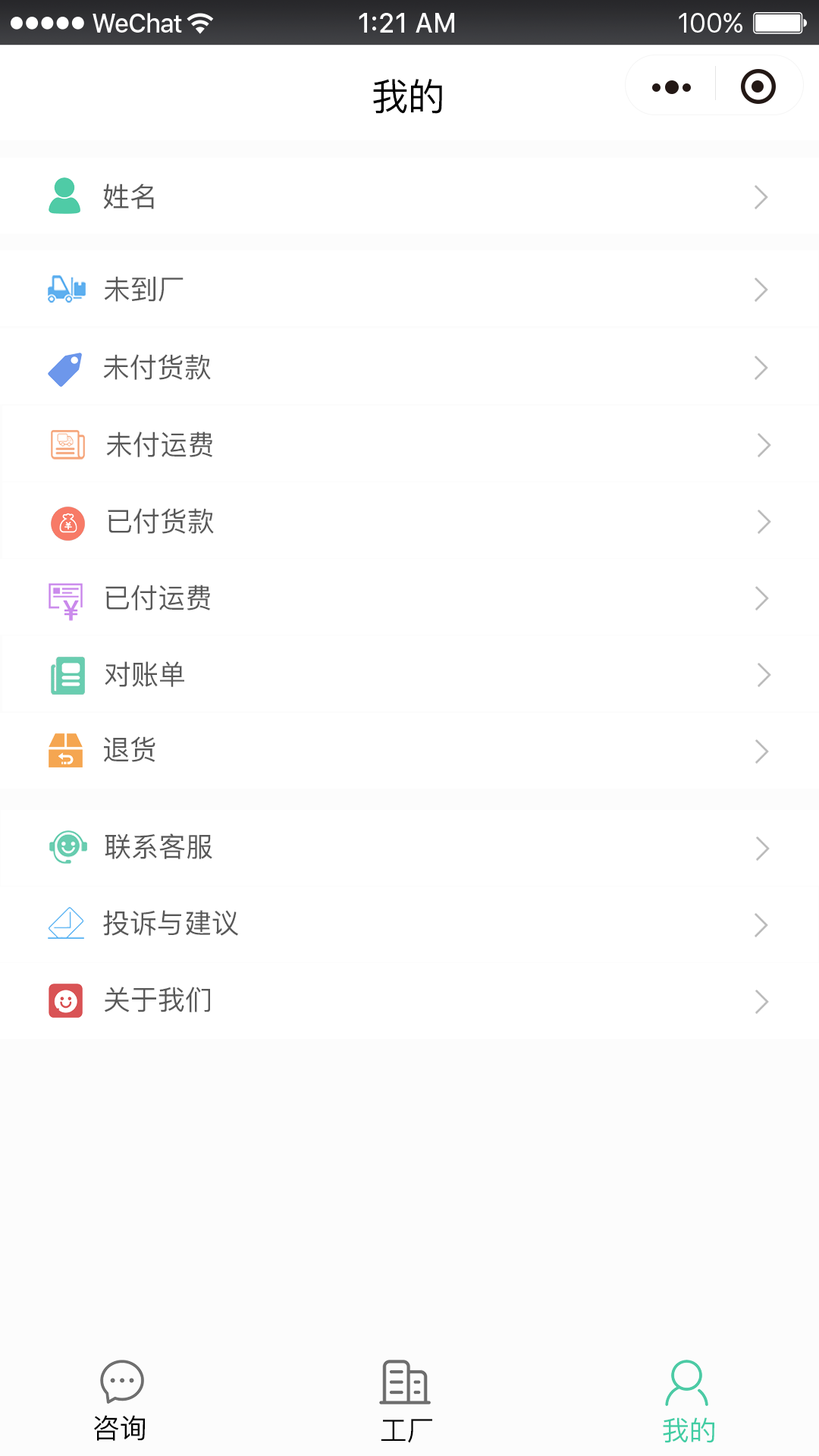
<style>
.page{position:relative;width:819px;height:1456px;background:#ffffff}
.page>*{position:absolute;margin:0}
.t1{font:37.9px "PingFangSC-Regular";color:#000000}
.t2{font:27.3px "PingFangSC-Regular";color:#585858}
.t3{font:27.3px "PingFangSC-Regular";color:#000000}
.t4{font:27.3px "PingFangSC-Regular";color:#40cda4}
</style>
<div class="page">
<p class="t1" style="left:373px;top:79px;width:69px;height:35px">我的</p>
<p class="t2" style="left:103px;top:184px;width:51px;height:25px">姓名</p>
<p class="t2" style="left:104px;top:276px;width:80px;height:26px">未到厂</p>
<p class="t2" style="left:103px;top:354px;width:108px;height:26px">未付货款</p>
<p class="t2" style="left:106px;top:431px;width:107px;height:26px">未付运费</p>
<p class="t2" style="left:108px;top:508px;width:106px;height:26px">已付货款</p>
<p class="t2" style="left:105px;top:585px;width:106px;height:25px">已付运费</p>
<p class="t2" style="left:105px;top:661px;width:79px;height:26px">对账单</p>
<p class="t2" style="left:104px;top:736px;width:51px;height:26px">退货</p>
<p class="t2" style="left:105px;top:833px;width:107px;height:26px">联系客服</p>
<p class="t2" style="left:103px;top:910px;width:135px;height:26px">投诉与建议</p>
<p class="t2" style="left:105px;top:987px;width:105px;height:25px">关于我们</p>
<p class="t3" style="left:94px;top:1415px;width:51px;height:26px">咨询</p>
<p class="t3" style="left:381px;top:1419px;width:51px;height:24px">工厂</p>
<p class="t4" style="left:663px;top:1417px;width:51px;height:26px">我的</p>
</div>
